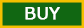
<style>
.page{position:relative;width:84px;height:28px;background:#116712}
.page>*{position:absolute;margin:0}
.t1{font:17px "Verdana";color:#ffffff;font-weight:bold}
</style>
<div class="page">
<p class="t1" style="left:25px;top:7px;width:35px;height:13px">BUY</p>
</div>
